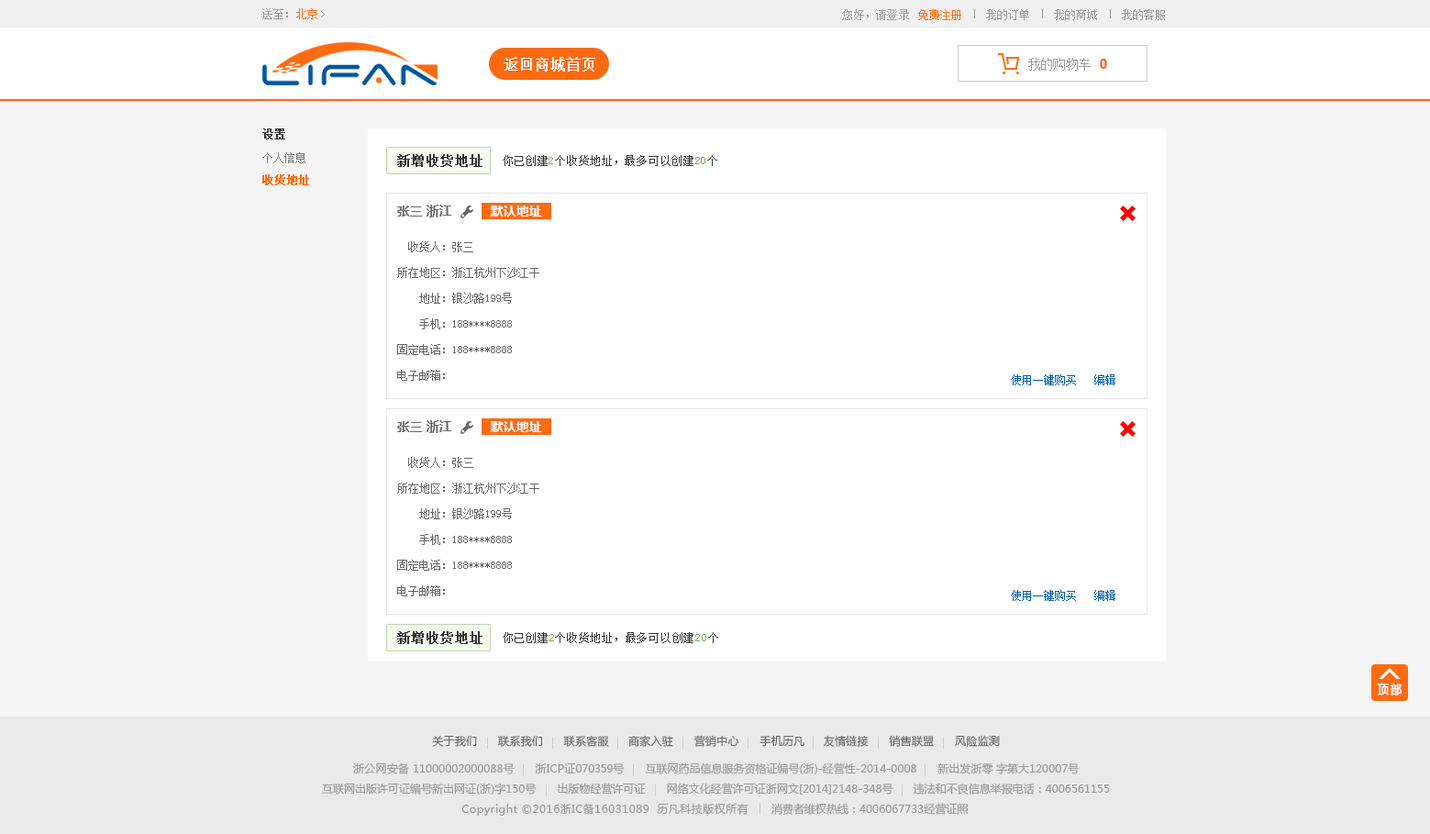
<style>
.page{position:relative;width:1430px;height:834px;background:#ffffff}
.page>*{position:absolute;margin:0}
.t1{font:10.8px "SimSun";letter-spacing:0.02em;color:#999999}
.t2{font:10.8px "SimSun";letter-spacing:0.02em;color:#fc6b12}
.t3{font:11.3px "SimSun";letter-spacing:0.02em;color:#999999}
.t4{font:11.3px "SimSun";letter-spacing:0.02em;color:#fc6b12}
.t5{font:14.7px "SimSun";color:#ffffff;font-weight:bold}
.t6{font:12.8px "SimSun";letter-spacing:-0.06em;color:#999999}
.t7{font:12.8px "MicrosoftYaHei-Bold";letter-spacing:-0.06em;color:#fc6b12}
.t8{font:11px "SimSun";color:#333333;font-weight:bold}
.t9{font:11px "SimSun";color:#777777}
.t10{font:12.8px "SimSun";letter-spacing:0.06em;color:#333333;font-weight:bold}
.t11{font:11px "SimSun";letter-spacing:0.06em;color:#333333}
.t12{font:11px "SimSun";letter-spacing:0.06em;color:#71b247}
.t13{font:11px "SimSun";color:#fc6b12;font-weight:bold}
.t14{font:12.8px "MicrosoftYaHei-Bold";color:#666666}
.t15{font:12.8px "MicrosoftYaHei-Bold";color:#ffffff}
.t16{font:11px "SimSun";color:#666666}
.t17{font:11px "SimSun";color:#005ea7}
.t18{font:12.1px "MicrosoftYaHei";color:#ffffff;font-weight:bold;scale:0.91 1}
.t19{font:11px "MicrosoftYaHei";letter-spacing:0.02em;color:#666666}
.t20{font:11px "MicrosoftYaHei";color:#999999}
.t21{font:11px "MicrosoftYaHei";letter-spacing:0.02em;color:#999999}
.t22{font:11px "MicrosoftYaHei";letter-spacing:-0.02em;color:#999999}
.t23{font:11px "MicrosoftYaHei";letter-spacing:0.04em;color:#999999}
</style>
<div class="page">
<p class="t1" style="left:262px;top:8px;width:55px;height:11px">送至：<span class="t2">北京</span></p>
<p class="t3" style="left:842px;top:9px;width:67px;height:11px">您好，请登录</p>
<p class="t4" style="left:918px;top:9px;width:43px;height:11px">免费注册</p>
<p class="t3" style="left:986px;top:9px;width:43px;height:11px">我的订单</p>
<p class="t3" style="left:1054px;top:9px;width:43px;height:11px">我的商城</p>
<p class="t3" style="left:1122px;top:9px;width:43px;height:11px">我的客服</p>
<p class="t5" style="left:504px;top:57px;width:91px;height:15px">返回商城首页</p>
<p class="t6" style="left:1028px;top:58px;width:63px;height:13px">我的购物车</p>
<p class="t7" style="left:1100px;top:59px;width:7px;height:10px">0</p>
<p class="t8" style="left:262px;top:128px;width:23px;height:11px">设置</p>
<p class="t9" style="left:262px;top:152px;width:43px;height:11px">个人信息</p>
<p class="t10" style="left:397px;top:154px;width:86px;height:13px">新增收货地址</p>
<p class="t11" style="left:503px;top:155px;width:214px;height:11px">你已创建<span class="t12">2</span>个收货地址，最多可以创建<span class="t12">20</span>个</p>
<p class="t13" style="left:262px;top:174px;width:47px;height:11px">收货地址</p>
<p class="t14" style="left:397px;top:205px;width:55px;height:12px">张三  浙江</p>
<p class="t15" style="left:490px;top:205px;width:52px;height:11px">默认地址</p>
<p class="t16" style="left:408px;top:241px;width:65px;height:11px">收货人：张三</p>
<p class="t16" style="left:397px;top:267px;width:142px;height:11px">所在地区：浙江杭州下沙江干</p>
<p class="t16" style="left:419px;top:293px;width:93px;height:11px">地址：银沙路199号</p>
<p class="t16" style="left:419px;top:318px;width:93px;height:11px">手机：188****8888</p>
<p class="t16" style="left:397px;top:344px;width:115px;height:11px">固定电话：188****8888</p>
<p class="t16" style="left:397px;top:370px;width:48px;height:11px">电子邮箱：</p>
<p class="t17" style="left:1011px;top:374px;width:65px;height:11px">使用一键购买</p>
<p class="t17" style="left:1094px;top:374px;width:21px;height:11px">编辑</p>
<p class="t14" style="left:397px;top:420px;width:55px;height:13px">张三  浙江</p>
<p class="t15" style="left:490px;top:421px;width:52px;height:11px">默认地址</p>
<p class="t16" style="left:408px;top:457px;width:65px;height:11px">收货人：张三</p>
<p class="t16" style="left:397px;top:483px;width:142px;height:11px">所在地区：浙江杭州下沙江干</p>
<p class="t16" style="left:419px;top:508px;width:93px;height:11px">地址：银沙路199号</p>
<p class="t16" style="left:419px;top:534px;width:93px;height:11px">手机：188****8888</p>
<p class="t16" style="left:397px;top:560px;width:115px;height:11px">固定电话：188****8888</p>
<p class="t16" style="left:397px;top:585px;width:48px;height:11px">电子邮箱：</p>
<p class="t17" style="left:1011px;top:590px;width:65px;height:11px">使用一键购买</p>
<p class="t17" style="left:1094px;top:590px;width:21px;height:11px">编辑</p>
<p class="t10" style="left:397px;top:631px;width:86px;height:13px">新增收货地址</p>
<p class="t11" style="left:503px;top:632px;width:215px;height:11px">你已创建<span class="t12">2</span>个收货地址，最多可以创建<span class="t12">20</span>个</p>
<p class="t18" style="left:1377px;top:683px;width:26px;height:13px">顶 部</p>
<p class="t19" style="left:432px;top:735px;width:568px;height:12px">关于我们      联系我们      联系客服     商家入驻      营销中心      手机历凡     友情链接      销售联盟      风险监测</p>
<p class="t20" style="left:353px;top:762px;width:727px;height:12px"><span class="t21">浙公网安备 </span>11000002000088<span class="t21">号      浙ICP证</span><span class="t22">070359号     </span>互联网药品信息服务资格证编号(<span class="t21">浙</span>)-经营性-2014-0008      新出发<span class="t21">浙</span>零 字第大120007号</p>
<p class="t20" style="left:322px;top:782px;width:788px;height:12px">互联网出版许可证编号新出网证(<span class="t21">浙</span>)字150号       出版物经营许可证       网络文化经营许可证<span class="t21">浙</span>网文[2014]2148-348号       违法和不良信息举报电话：4006561155</p>
<p class="t23" style="left:461px;top:803px;width:508px;height:12px"><span class="t20"><br><br></span>Copyright ©2016浙IC备16031089  历凡科技版权所有<span class="t20">       消费者维权热线：4006067733经营证照</span></p>
</div>
